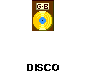
<style>
.page{position:relative;width:88px;height:71px;background:#ffffff}
.page>*{position:absolute;margin:0}
.t1{font:10.3px "Arial-BoldMT";color:#000000;scale:1.11 1}
</style>
<div class="page">
<p class="t1" style="left:27px;top:64px;width:32px;height:7px">DISCO</p>
</div>
